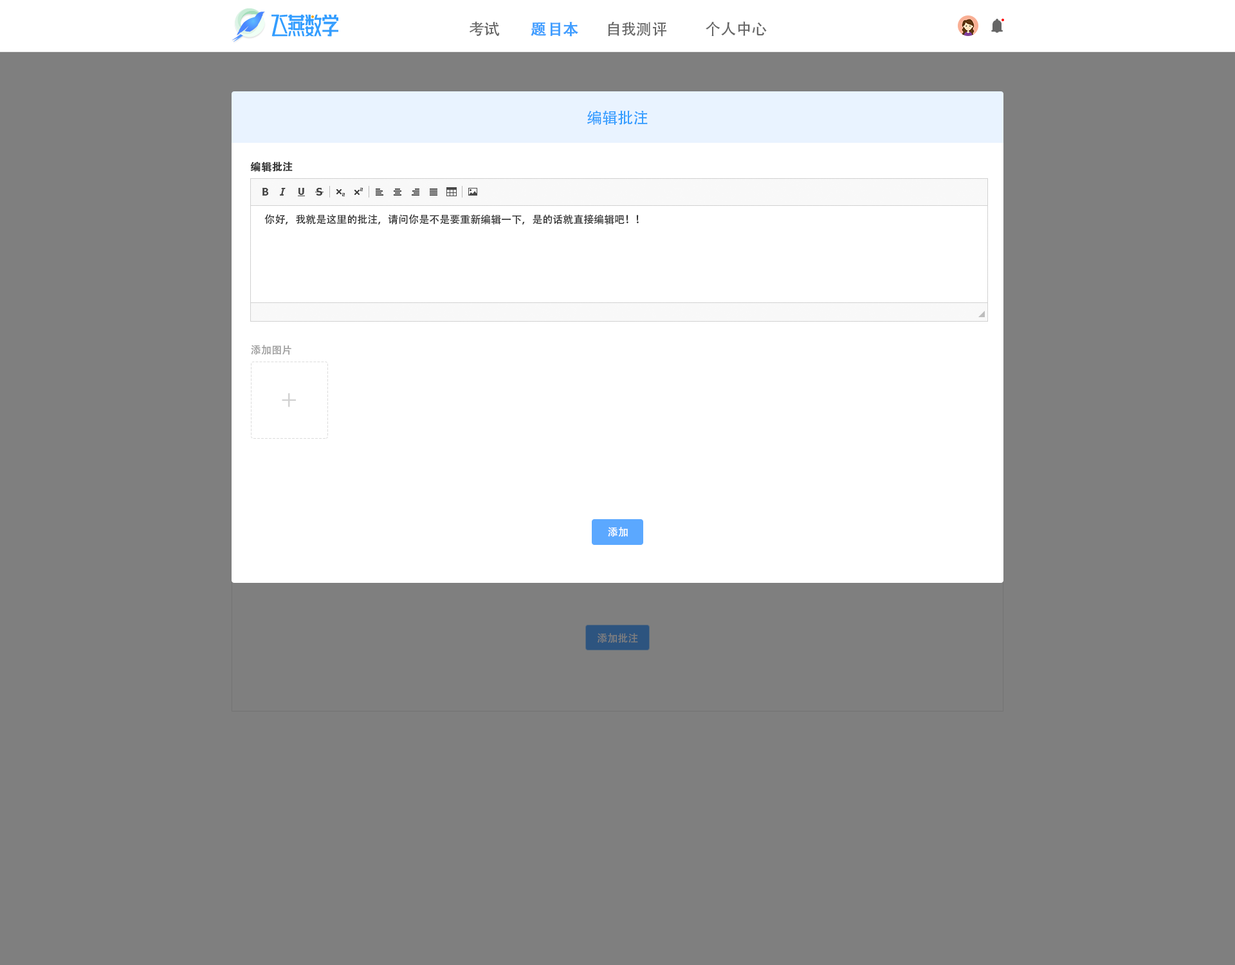
<style>
.page{position:relative;width:1235px;height:965px;background:#7f7f7f}
.page>*{position:absolute;margin:0}
.t1{font:15.4px "AdobeHeitiStd-Regular";color:#666666}
.t2{font:15.4px "AdobeHeitiStd-Regular";color:#409eff;font-weight:bold}
.t3{font:15.4px "AdobeHeitiStd-Regular";color:#339dff}
.t4{font:10.3px "AdobeHeitiStd-Regular";color:#333333;font-weight:bold}
.t5{font:10.3px "AdobeHeitiStd-Regular";color:#333333}
.t6{font:10.3px "AdobeHeitiStd-Regular";color:#999999}
.t7{font:19.3px "AdobeHeitiStd-Regular";color:#d1d1d1}
.t8{font:10.3px "AdobeHeitiStd-Regular";color:#ffffff}
.t9{font:10.3px "AdobeHeitiStd-Regular";color:#7f7f7f}
</style>
<div class="page">
<p class="t1" style="left:469px;top:21px;width:31px;height:15px">考试</p>
<p class="t2" style="left:531px;top:22px;width:47px;height:15px">题目本</p>
<p class="t1" style="left:608px;top:21px;width:59px;height:16px">自我测评</p>
<p class="t1" style="left:706px;top:21px;width:61px;height:15px">个人中心</p>
<p class="t3" style="left:587px;top:111px;width:61px;height:14px">编辑批注</p>
<p class="t4" style="left:250px;top:162px;width:43px;height:10px">编辑批注</p>
<p class="t5" style="left:264px;top:214px;width:375px;height:11px">你好，我就是这里的批注，请问你是不是要重新编辑一下，是的话就直接编辑吧！！</p>
<p class="t6" style="left:251px;top:345px;width:40px;height:10px">添加图片</p>
<p class="t7" style="left:282px;top:393px;width:14px;height:14px">＋</p>
<p class="t8" style="left:608px;top:527px;width:20px;height:10px">添加</p>
<p class="t9" style="left:598px;top:633px;width:40px;height:10px">添加批注</p>
</div>
